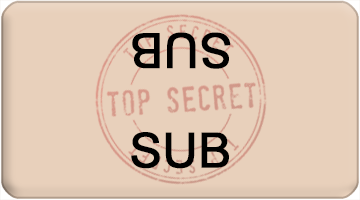
<style>
.page{position:relative;width:360px;height:200px;background:#e8d0bb}
.page>*{position:absolute;margin:0}
.t1{font:48px "ArialMT";color:#000000;font-weight:bold}
</style>
<div class="page">
<p class="t1" style="left:132px;top:32px;width:99px;height:37px;rotate:180deg">SUB</p>
<p class="t1" style="left:131px;top:132px;width:98px;height:37px">SUB</p>
</div>
